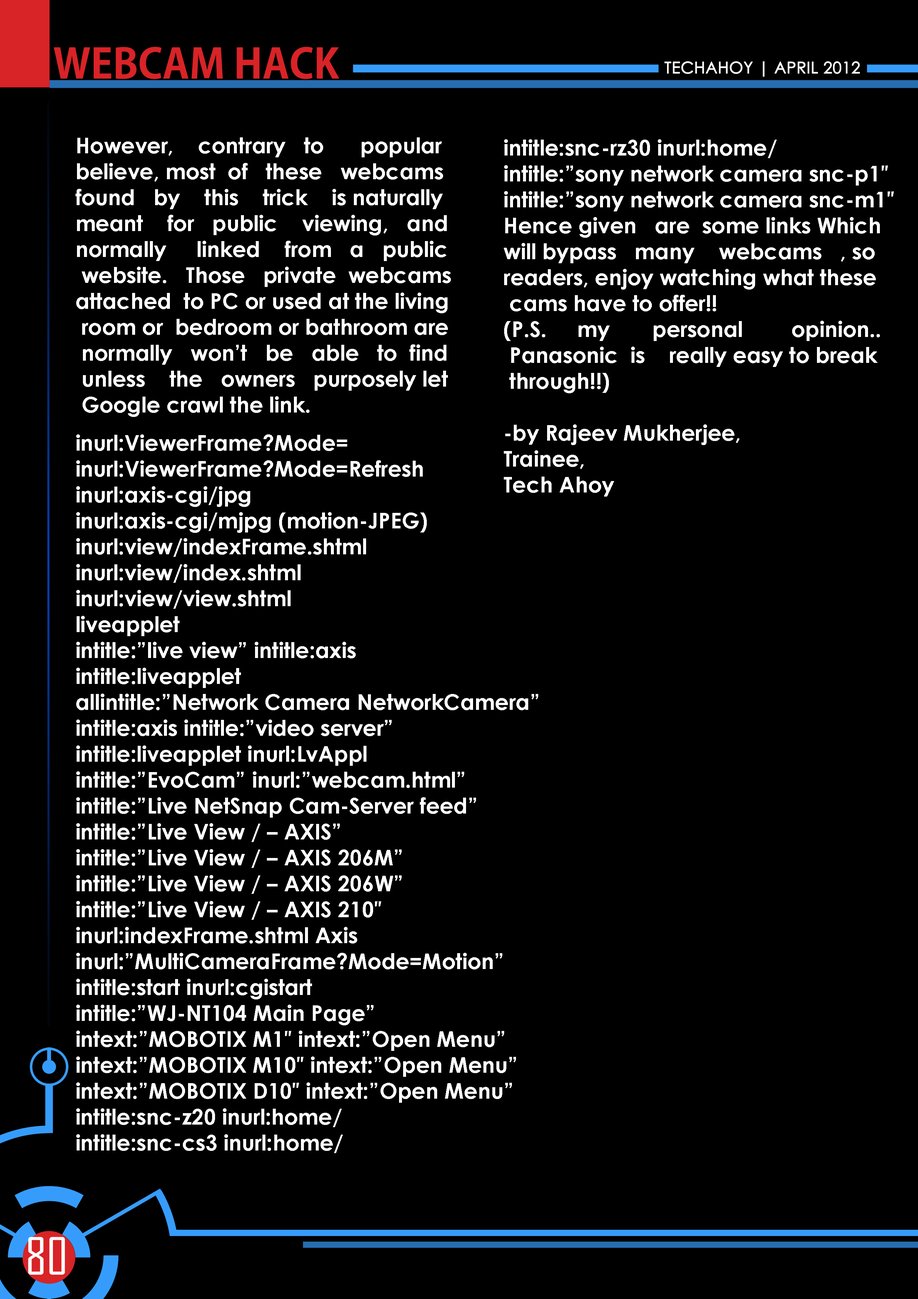
<style>
.page{position:relative;width:918px;height:1299px;background:#000000}
.page>*{position:absolute;margin:0}
.t1{font:40.6px "AdobeGothicStd-Bold";color:#d82327;text-transform:uppercase}
.t2{font:16px "CenturyGothic";color:#ffffff;text-transform:uppercase;font-weight:bold}
.t3{font:21.6px "CenturyGothic-Bold";color:#ffffff}
.t4{font:49.1px "AgencyFB-Reg";color:#ffffff;text-transform:uppercase}
</style>
<div class="page">
<p class="t1" style="left:54px;top:47px;width:285px;height:32px">WEBCAM HACK</p>
<p class="t2" style="left:665px;top:61px;width:195px;height:16px">techahoy | APRIL 2012</p>
<p class="t3" style="left:76px;top:137px;width:375px;height:280px">However,    contrary   to      popular<br>believe, most  of   these   webcams  <br>found   by    this    trick    is naturally <br>meant    for   public    viewing,   and <br>normally     linked    from   a   public<br> website.   Those   private  webcams <br>attached  to PC or used at the living<br> room or  bedroom or bathroom are<br> normally   won’t   be   able   to  find<br> unless    the   owners   purposely let<br> Google crawl the link.</p>
<p class="t3" style="left:504px;top:139px;width:390px;height:357px">intitle:snc-rz30 inurl:home/<br>intitle:”sony network camera snc-p1″<br>intitle:”sony network camera snc-m1″<br>Hence given   are  some links Which <br>will bypass   many    webcams   , so <br>readers, enjoy watching what these<br> cams have to offer!! <br>(P.S.     my       personal        opinion..<br> Panasonic  is    really easy to break<br> through!!)<br><br>-by Rajeev Mukherjee,<br>Trainee,<br>Tech Ahoy</p>
<p class="t3" style="left:76px;top:434px;width:462px;height:719px">inurl:ViewerFrame?Mode=<br>inurl:ViewerFrame?Mode=Refresh<br>inurl:axis-cgi/jpg<br>inurl:axis-cgi/mjpg (motion-JPEG)<br>inurl:view/indexFrame.shtml<br>inurl:view/index.shtml<br>inurl:view/view.shtml<br>liveapplet<br>intitle:”live view” intitle:axis<br>intitle:liveapplet<br>allintitle:”Network Camera NetworkCamera”<br>intitle:axis intitle:”video server”<br>intitle:liveapplet inurl:LvAppl<br>intitle:”EvoCam” inurl:”webcam.html”<br>intitle:”Live NetSnap Cam-Server feed”<br>intitle:”Live View / – AXIS”<br>intitle:”Live View / – AXIS 206M”<br>intitle:”Live View / – AXIS 206W”<br>intitle:”Live View / – AXIS 210″<br>inurl:indexFrame.shtml Axis<br>inurl:”MultiCameraFrame?Mode=Motion”<br>intitle:start inurl:cgistart<br>intitle:”WJ-NT104 Main Page”<br>intext:”MOBOTIX M1″ intext:”Open Menu”<br>intext:”MOBOTIX M10″ intext:”Open Menu”<br>intext:”MOBOTIX D10″ intext:”Open Menu”<br>intitle:snc-z20 inurl:home/<br>intitle:snc-cs3 inurl:home/</p>
<p class="t4" style="left:28px;top:1237px;width:37px;height:38px">80</p>
</div>
